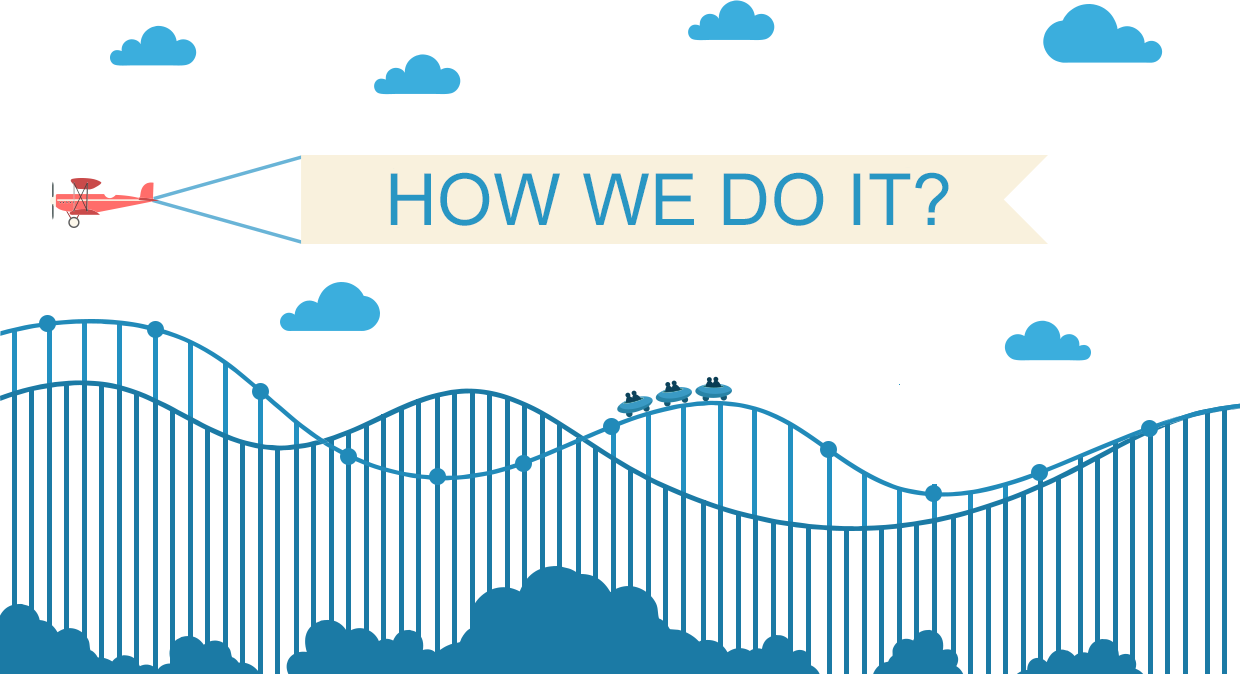
<style>
.page{position:relative;width:1240px;height:674px;background:#ffffff}
.page>*{position:absolute;margin:0}
.t1{font:71.9px "ArialMT";letter-spacing:0.005em;color:#2896c3}
</style>
<div class="page">
<p class="t1" style="left:390px;top:172px;width:559px;height:54px">HOW WE DO IT?</p>
</div>
